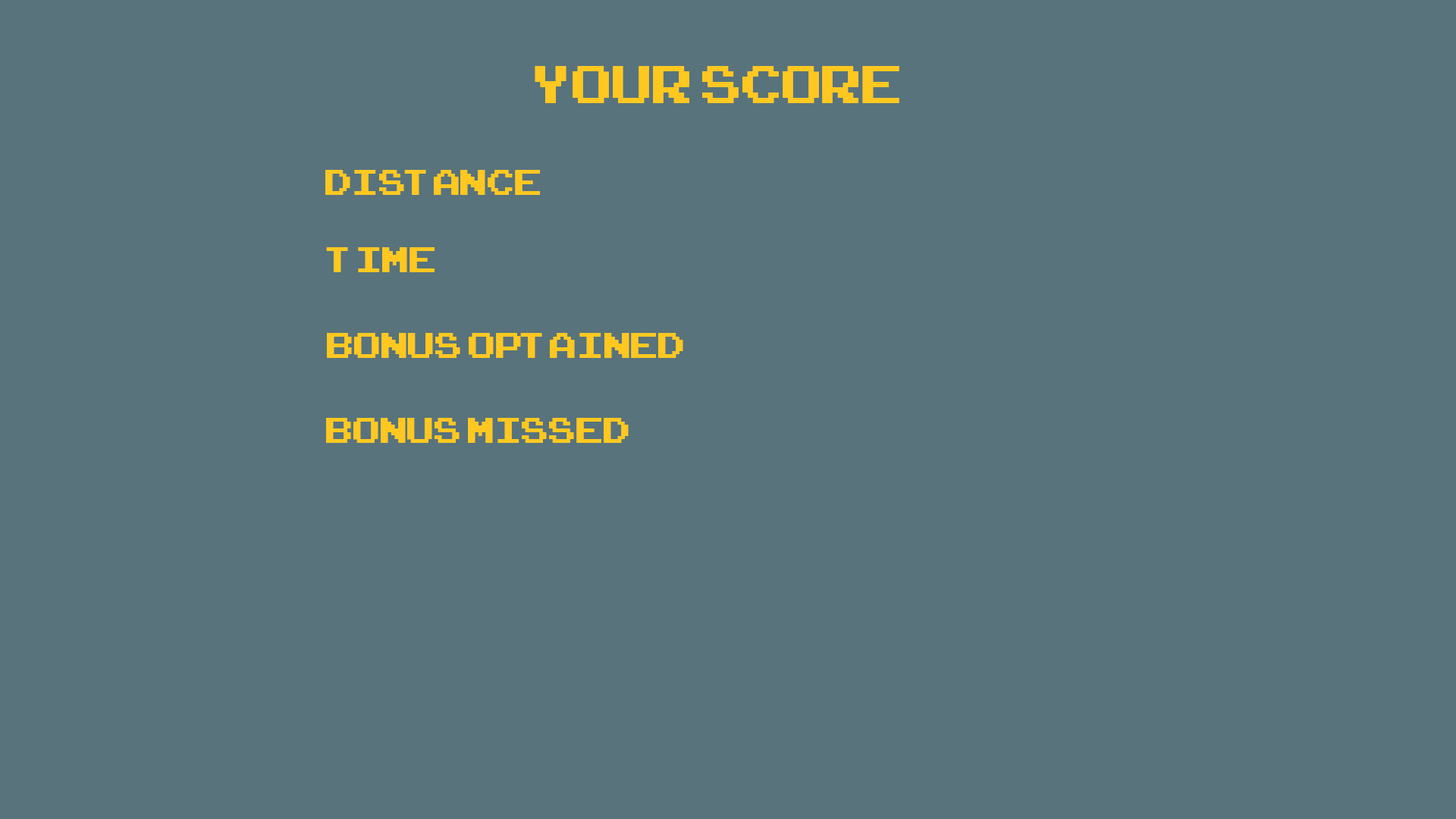
<style>
.page{position:relative;width:1456px;height:819px;background:#58737c}
.page>*{position:absolute;margin:0}
.t1{font:72.8px "ArcadeClassic";color:#ffc820}
.t2{font:49.3px "ArcadeClassic";color:#ffc820}
</style>
<div class="page">
<p class="t1" style="left:535px;top:66px;width:364px;height:37px">your score</p>
<p class="t2" style="left:325px;top:170px;width:215px;height:25px">Distance</p>
<p class="t2" style="left:326px;top:247px;width:109px;height:25px">time</p>
<p class="t2" style="left:327px;top:333px;width:356px;height:25px">bonus optained</p>
<p class="t2" style="left:326px;top:418px;width:303px;height:25px">bonus missed</p>
</div>
